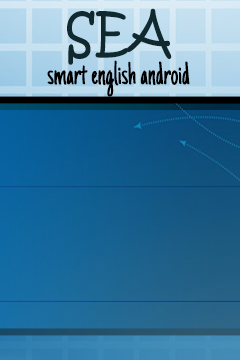
<style>
.page{position:relative;width:240px;height:360px}
.page>*{position:absolute;margin:0}
.t1{font:54px "KristenITC-Regular";color:#10292f;scale:0.89 1}
.t2{font:34px "JustAnotherHand-Regular";color:#000000;scale:0.89 1}
</style>
<div class="page">
<p class="t1" style="left:67px;top:8px;width:105px;height:57px">SEA</p>
<p class="t2" style="left:47px;top:60px;width:143px;height:37px">smart english android</p>
</div>
